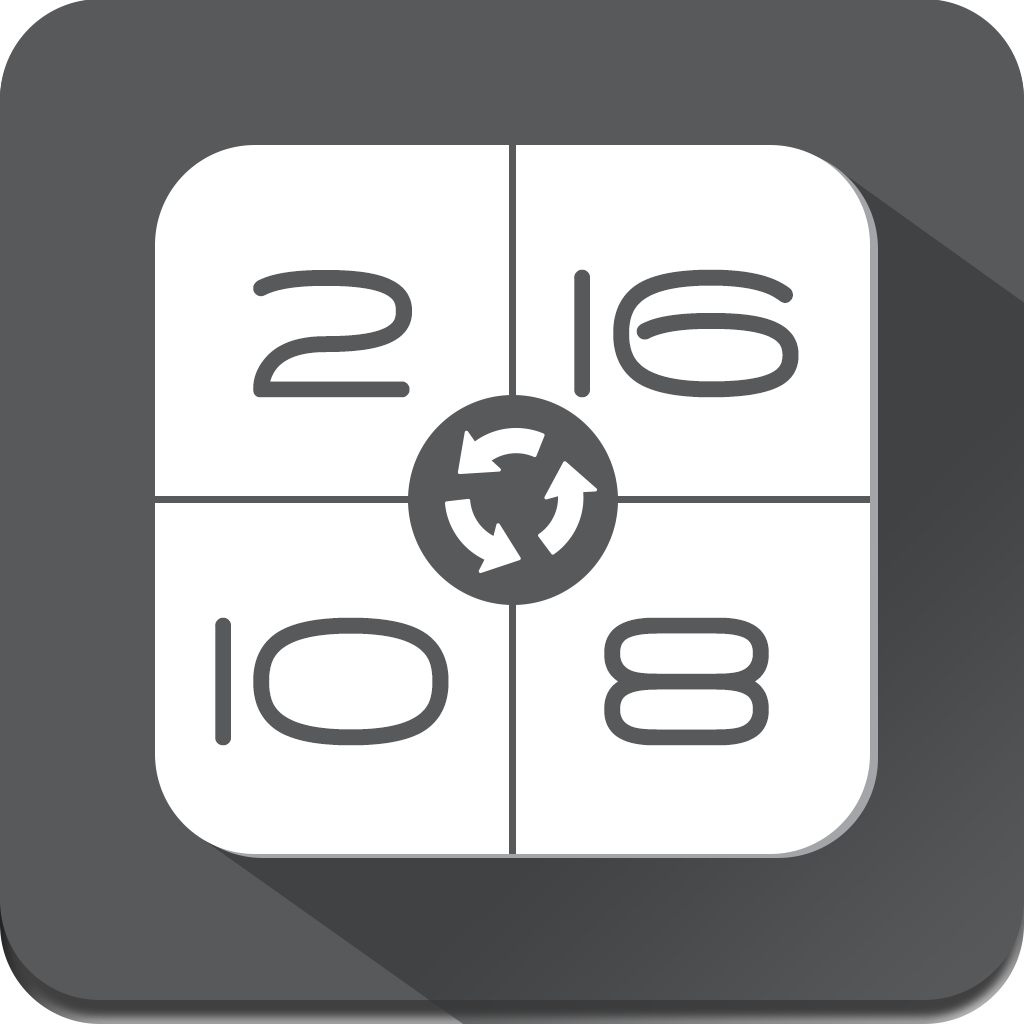
<style>
.page{position:relative;width:1024px;height:1024px;background:#ffffff}
.page>*{position:absolute;margin:0}
.t1{font:224.2px "AirConditioner";color:#58595b}
</style>
<div class="page">
<p class="t1" style="left:253px;top:270px;width:159px;height:128px">2</p>
<p class="t1" style="left:574px;top:269px;width:225px;height:129px">16</p>
<p class="t1" style="left:215px;top:617px;width:234px;height:129px">10</p>
<p class="t1" style="left:604px;top:617px;width:165px;height:129px">8</p>
</div>
